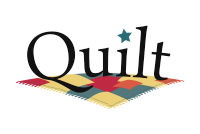
<style>
.page{position:relative;width:200px;height:134px;background:#ffffff}
.page>*{position:absolute;margin:0}
.t1{font:99.4px "DaunPenh";color:#121212;scale:0.8 1}
</style>
<div class="page">
<p class="t1" style="left:27px;top:25px;width:144px;height:68px;rotate:-1deg">Quilt</p>
</div>
